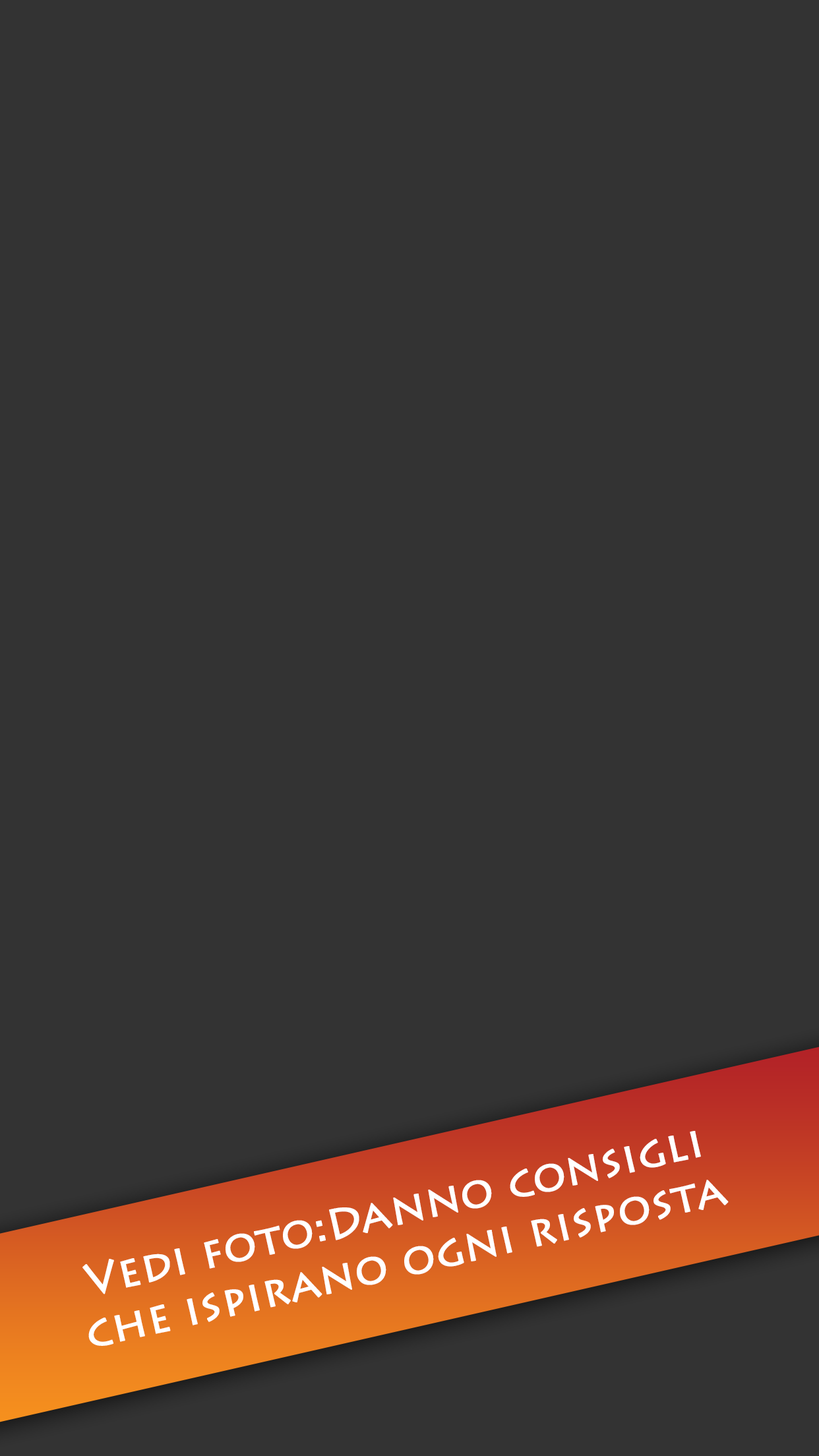
<style>
.page{position:relative;width:819px;height:1456px;background:#333333}
.page>*{position:absolute;margin:0}
.t1{font:43px "LithosPro-Regular";color:#ffffff;font-weight:bold}
</style>
<div class="page">
<p class="t1" style="left:82px;top:1131px;width:647px;height:215px;text-align:center;rotate:-13deg">Vedi foto:Danno consigli<br>che ispirano ogni risposta</p>
</div>
